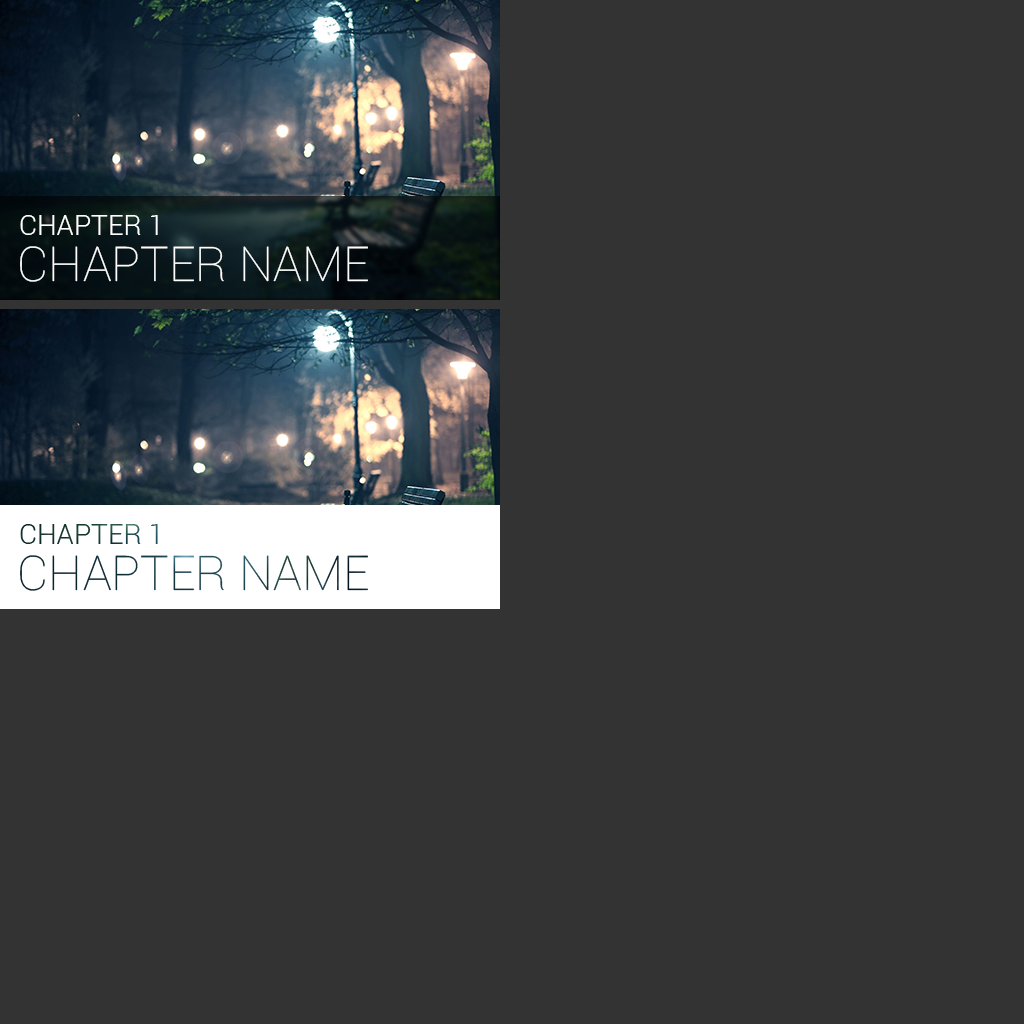
<style>
.page{position:relative;width:1024px;height:1024px;background:#333333}
.page>*{position:absolute;margin:0}
.t1{font:28px "Roboto-Light";color:#ffffff}
.t2{font:48px "Roboto-Thin";color:#ffffff}
</style>
<div class="page">
<p class="t1" style="left:20px;top:215px;width:138px;height:20px">CHAPTER 1</p>
<p class="t2" style="left:20px;top:246px;width:348px;height:36px">CHAPTER NAME</p>
</div>
